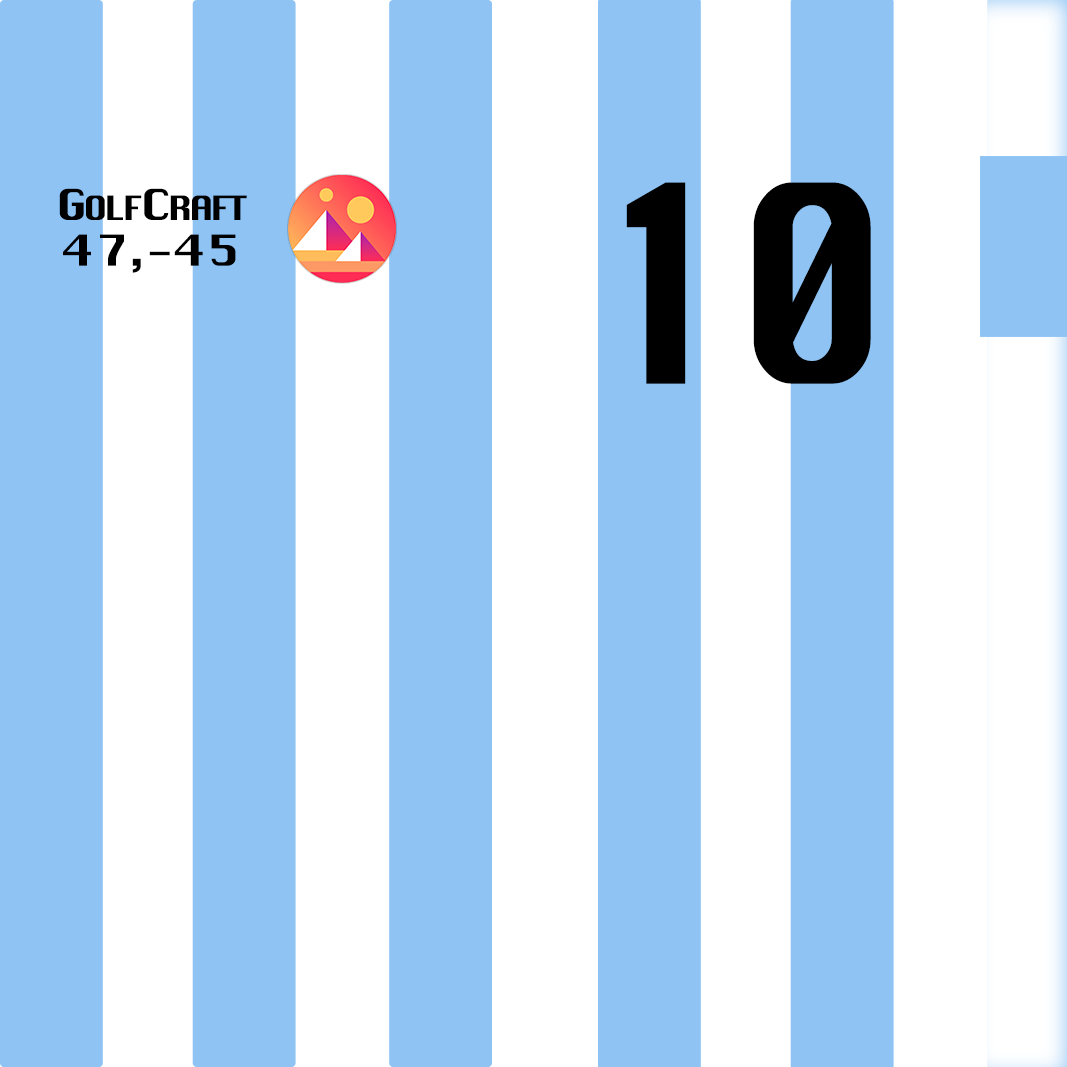
<style>
.page{position:relative;width:1067px;height:1067px;background:#8ec3f3}
.page>*{position:absolute;margin:0}
.t1{font:268px "Krungthep";letter-spacing:-0.04em;color:#000000;scale:0.87 1}
.t2{font:41.7px/45.8px "Krungthep";letter-spacing:0.02em;color:#000000;scale:1.15 1}
.t3{font:41.7px/45.8px "Krungthep";letter-spacing:-0.1em;color:#000000;scale:1.15 1}
.t4{font:32.6px/45.8px "Krungthep";letter-spacing:-0.1em;color:#000000;scale:1.15 1}
</style>
<div class="page">
<p class="t1" style="left:626px;top:182px;width:245px;height:202px">10</p>
<p class="t2" style="left:59px;top:188px;width:188px;height:85px;text-align:center"><span class="t3">G</span><span class="t4">OLF</span><span class="t3">C</span><span class="t4">RAFT<br></span>47,-45</p>
</div>
